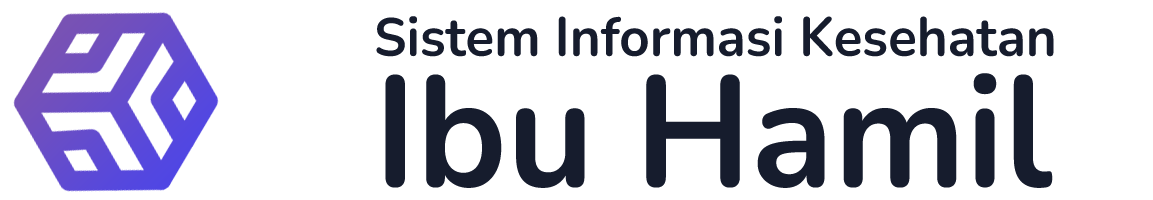
<style>
.page{position:relative;width:1153px;height:200px;background:#ffffff}
.page>*{position:absolute;margin:0}
.t1{font:54.9px/130.5px "Nunito-Bold";color:#161c2d;scale:0.96 1}
.t2{font:53.6px/130.5px "Nunito-Bold";color:#161c2d;scale:0.96 1}
.t3{font:156.6px/130.5px "Nunito-Bold";color:#161c2d;scale:0.96 1}
</style>
<div class="page">
<p class="t1" style="left:376px;top:16px;width:678px;height:172px"><span class="t2">S</span>istem Informasi Kesehatan<br><span class="t3">Ibu Hamil</span></p>
</div>
